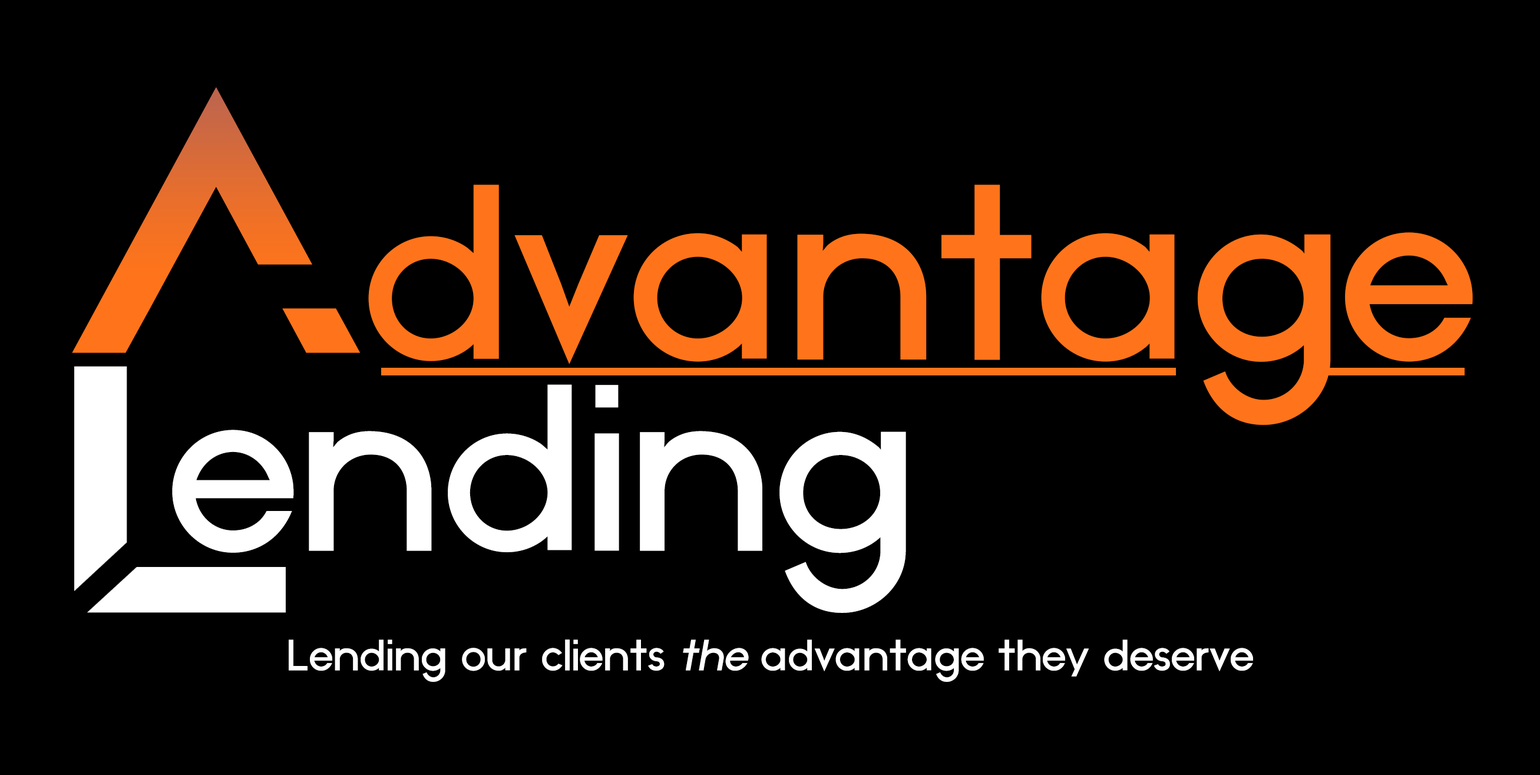
<style>
.page{position:relative;width:1540px;height:775px;background:#000000}
.page>*{position:absolute;margin:0}
.t1{font:331.4px "Anurati-Regular";letter-spacing:-0.02em;color:#f47123;scale:1.08 1}
.t2{font:249.3px "Medium";letter-spacing:-0.025em;color:#ff741a}
.t3{font:236.9px "Medium";letter-spacing:-0.02em;color:#ffffff}
.t4{font:43.6px "Medium";letter-spacing:-0.02em;color:#ffffff}
.t5{font:43.6px "Medium";letter-spacing:-0.02em;color:#ffffff;font-style:italic}
</style>
<div class="page">
<p class="t1" style="left:72px;top:87px;width:288px;height:266px">A</p>
<p class="t2" style="left:368px;top:184px;width:1104px;height:241px">dvantage</p>
<p class="t3" style="left:172px;top:384px;width:734px;height:229px">ending</p>
<p class="t4" style="left:289px;top:639px;width:964px;height:42px">Lending our clients <span class="t5">the </span>advantage they deserve</p>
</div>
